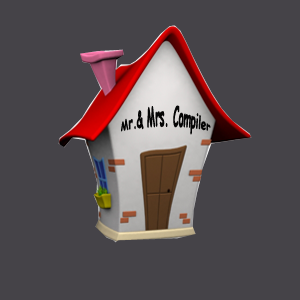
<style>
.page{position:relative;width:300px;height:300px;background:#454348}
.page>*{position:absolute;margin:0}
.t1{font:10.1px "ComicSansMS-Bold";color:#050505;scale:0.91 1}
</style>
<div class="page">
<p class="t1" style="left:121px;top:105px;width:90px;height:30px">Mr.&amp; Mrs. Compiler</p>
</div>
